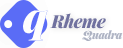
<style>
.page{position:relative;width:123px;height:48px;background:#ffffff}
.page>*{position:absolute;margin:0}
.t1{font:42.2px "PlayfairDisplay-BlackItalic";letter-spacing:-0.05em;color:#fefefe}
.t2{font:42.2px "PlayfairDisplay-BlackItalic";letter-spacing:-0.05em;color:#ffffff}
.t3{font:18px "PlayfairDisplay-BlackItalic";letter-spacing:-0.03em;color:#70719f}
.t4{font:11px "PlayfairDisplay-BlackItalic";letter-spacing:-0.03em;color:#adb2c2}
.t5{font:11px "PlayfairDisplay-BlackItalic";letter-spacing:-0.03em;color:#9fa4b4}
</style>
<div class="page">
<p class="t1" style="left:23px;top:10px;width:25px;height:31px">q</p>
<p class="t2" style="left:23px;top:10px;width:25px;height:31px">q</p>
<p class="t3" style="left:50px;top:13px;width:57px;height:16px">Rheme</p>
<p class="t3" style="left:50px;top:13px;width:56px;height:16px">Rheme</p>
<p class="t4" style="left:82px;top:30px;width:41px;height:11px">Quadra</p>
<p class="t5" style="left:82px;top:30px;width:40px;height:11px;opacity:0.8">Quadra</p>
</div>
